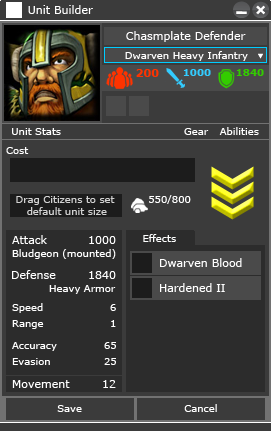
<style>
.page{position:relative;width:271px;height:431px;background:#3b3b3b}
.page>*{position:absolute;margin:0}
.t1{font:11px "Verdana";color:#ffffff}
.t2{font:11px "Verdana";color:#fffeff}
.t3{font:10px "Verdana";color:#ffffff}
.t4{font:11px "Verdana-Bold";color:#ff3300}
.t5{font:10px "Verdana-Bold";color:#33ccff}
.t6{font:10px "Verdana-Bold";color:#33cc00}
.t7{font:10px/12px "Verdana";color:#d2d2d2}
.t8{font:10px "Verdana";color:#feffff}
</style>
<div class="page">
<p class="t1" style="left:28px;top:5px;width:65px;height:9px">Unit Builder</p>
<p class="t2" style="left:126px;top:31px;width:120px;height:11px">Chasmplate Defender</p>
<p class="t3" style="left:125px;top:51px;width:123px;height:10px">Dwarven Heavy Infantry</p>
<p class="t4" style="left:136px;top:69px;width:23px;height:8px">200</p>
<p class="t5" style="left:183px;top:69px;width:28px;height:7px">1000</p>
<p class="t6" style="left:236px;top:69px;width:28px;height:7px">1840</p>
<p class="t3" style="left:12px;top:128px;width:49px;height:7px">Unit Stats</p>
<p class="t3" style="left:184px;top:128px;width:25px;height:7px">Gear</p>
<p class="t3" style="left:219px;top:127px;width:40px;height:8px">Abilities</p>
<p class="t3" style="left:6px;top:147px;width:23px;height:7px">Cost</p>
<p class="t7" style="left:16px;top:196px;width:99px;height:19px;text-align:center">Drag Citizens to set<br> default unit size</p>
<p class="t3" style="left:149px;top:195px;width:42px;height:9px">550/800</p>
<p class="t1" style="left:12px;top:235px;width:35px;height:9px">Attack</p>
<p class="t1" style="left:89px;top:236px;width:27px;height:8px">1000</p>
<p class="t8" style="left:143px;top:234px;width:33px;height:8px">Effects</p>
<p class="t3" style="left:12px;top:249px;width:104px;height:10px">Bludgeon (mounted)</p>
<p class="t1" style="left:12px;top:270px;width:44px;height:9px">Defense</p>
<p class="t1" style="left:160px;top:258px;width:82px;height:9px">Dwarven Blood</p>
<p class="t1" style="left:89px;top:271px;width:27px;height:8px">1840</p>
<p class="t3" style="left:49px;top:285px;width:67px;height:9px">Heavy Armor</p>
<p class="t1" style="left:160px;top:283px;width:65px;height:9px">Hardened II</p>
<p class="t3" style="left:12px;top:303px;width:31px;height:10px">Speed</p>
<p class="t3" style="left:110px;top:304px;width:6px;height:7px">6</p>
<p class="t3" style="left:12px;top:320px;width:32px;height:9px">Range</p>
<p class="t3" style="left:111px;top:320px;width:5px;height:7px">1</p>
<p class="t3" style="left:12px;top:342px;width:45px;height:9px">Accuracy</p>
<p class="t3" style="left:104px;top:342px;width:12px;height:7px">65</p>
<p class="t3" style="left:12px;top:358px;width:38px;height:7px">Evasion</p>
<p class="t3" style="left:104px;top:358px;width:12px;height:7px">25</p>
<p class="t1" style="left:12px;top:380px;width:58px;height:8px">Movement</p>
<p class="t1" style="left:103px;top:380px;width:13px;height:8px">12</p>
<p class="t3" style="left:57px;top:405px;width:25px;height:7px">Save</p>
<p class="t3" style="left:184px;top:404px;width:33px;height:8px">Cancel</p>
</div>
